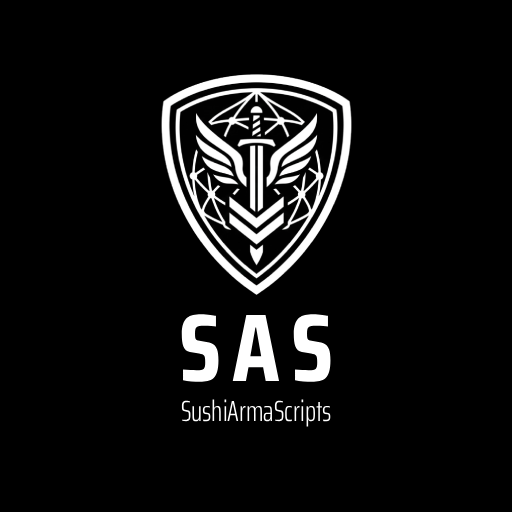
<style>
.page{position:relative;width:512px;height:512px;background:#000000}
.page>*{position:absolute;margin:0}
.t1{font:96px "SairaCondensed-Bold";letter-spacing:0.118em;color:#ffffff}
.t2{font:29px "SairaExtraCondensed-Light";color:#ffffff}
</style>
<div class="page">
<p class="t1" style="left:181px;top:314px;width:150px;height:68px">SAS</p>
<p class="t2" style="left:181px;top:399px;width:150px;height:28px">SushiArmaScripts</p>
</div>
